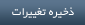
<style>
.page{position:relative;width:85px;height:25px}
.page>*{position:absolute;margin:0}
.t1{font:12px "BYekan";color:#ffffff}
</style>
<div class="page">
<p class="t1" style="left:12px;top:7px;width:62px;height:11px">ذخیره تغییرات</p>
</div>
